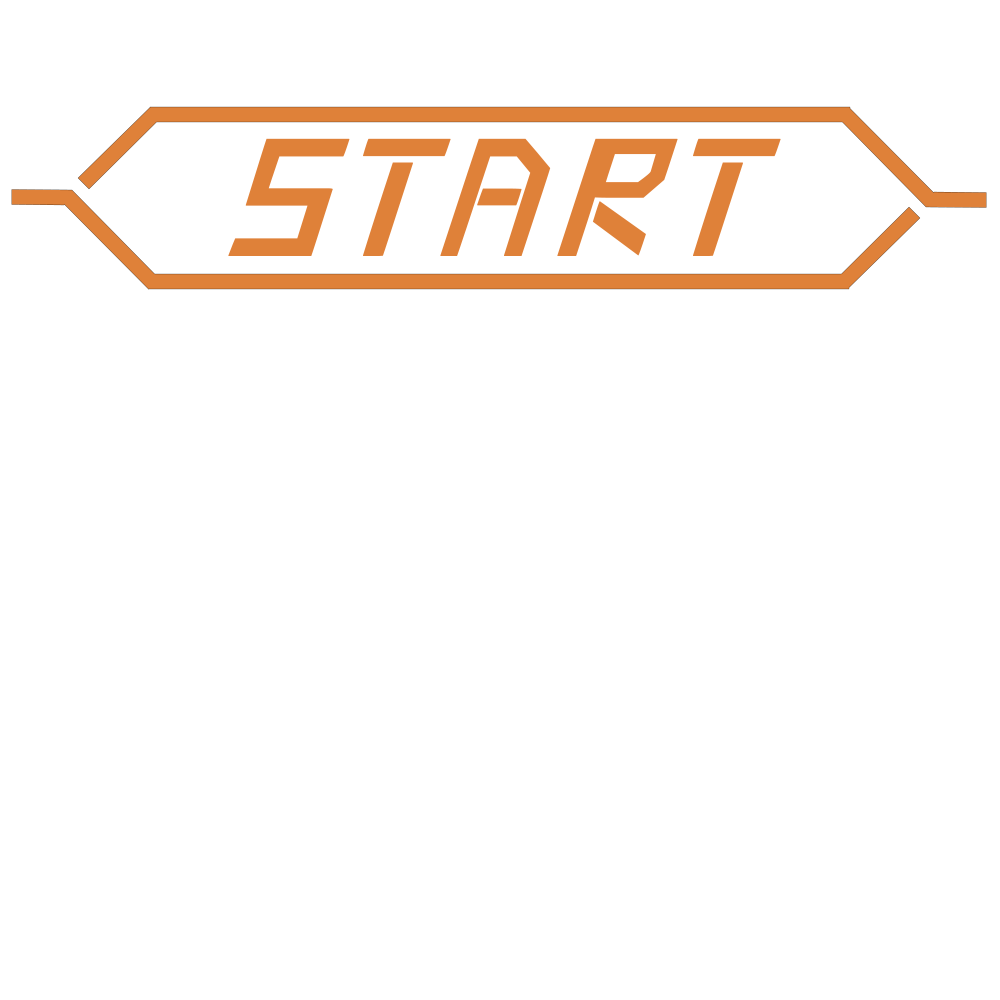
<style>
.page{position:relative;width:1000px;height:1000px;background:#ffffff}
.page>*{position:absolute;margin:0}
.t1{font:150px "NewTest";color:#df8139;font-style:italic}
</style>
<div class="page">
<p class="t1" style="left:228px;top:138px;width:553px;height:118px">START</p>
</div>
